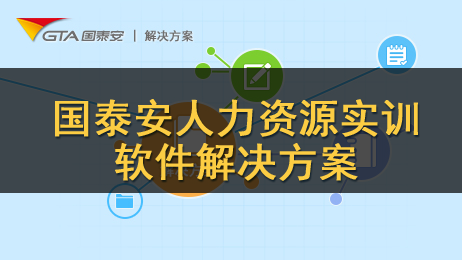
<style>
.page{position:relative;width:462px;height:260px;background:#ccebff}
.page>*{position:absolute;margin:0}
.t1{font:40px/44px "SimHei";color:#fccd43;font-weight:bold}
</style>
<div class="page">
<p class="t1" style="left:55px;top:99px;width:363px;height:82px;text-align:center">国泰安人力资源实训<br>软件解决方案</p>
</div>
